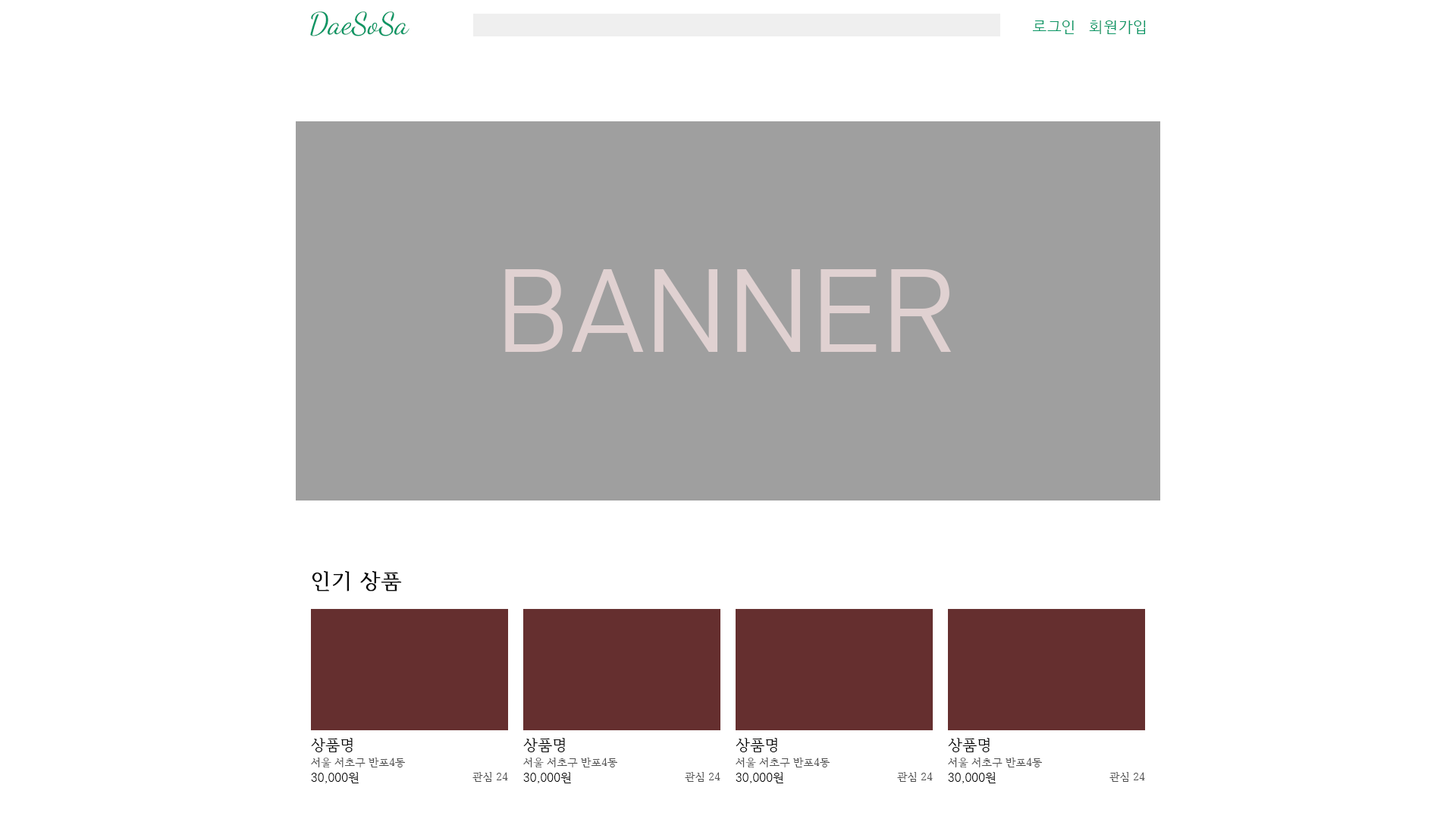
<style>
.page{position:relative;width:1456px;height:819px;background:#ffffff}
.page>*{position:absolute;margin:0}
.t1{font:30.3px "DancingScript-Regular";color:#0a9664}
.t2{font:15.2px "HCRDotum";color:#0a9664}
.t3{font:113.7px "HCRDotum";color:#e0d1d1}
.t4{font:21.2px "HCRBatang";color:#080808;font-weight:bold}
.t5{font:15.2px "HCRBatang";color:#080808}
.t6{font:10.6px "HCRBatang";color:#505050}
.t7{font:12.1px "HCRBatang";color:#080808}
</style>
<div class="page">
<p class="t1" style="left:310px;top:11px;width:99px;height:25px">DaeSoSa</p>
<p class="t2" style="left:1032px;top:20px;width:42px;height:14px">로그인</p>
<p class="t2" style="left:1089px;top:20px;width:57px;height:14px">회원가입</p>
<p class="t3" style="left:505px;top:269px;width:446px;height:83px">BANNER</p>
<p class="t4" style="left:312px;top:571px;width:90px;height:20px">인기 상품</p>
<p class="t5" style="left:311px;top:738px;width:42px;height:14px">상품명</p>
<p class="t5" style="left:523px;top:738px;width:42px;height:14px">상품명</p>
<p class="t5" style="left:736px;top:738px;width:41px;height:14px">상품명</p>
<p class="t5" style="left:948px;top:738px;width:42px;height:14px">상품명</p>
<p class="t6" style="left:311px;top:758px;width:94px;height:10px">서울 서초구 반포4동</p>
<p class="t6" style="left:523px;top:758px;width:94px;height:10px">서울 서초구 반포4동</p>
<p class="t6" style="left:736px;top:758px;width:94px;height:10px">서울 서초구 반포4동</p>
<p class="t6" style="left:948px;top:758px;width:94px;height:10px">서울 서초구 반포4동</p>
<p class="t7" style="left:311px;top:772px;width:48px;height:11px">30,000원</p>
<p class="t6" style="left:472px;top:772px;width:36px;height:10px">관심 24</p>
<p class="t7" style="left:523px;top:772px;width:48px;height:11px">30,000원</p>
<p class="t6" style="left:685px;top:772px;width:35px;height:10px">관심 24</p>
<p class="t7" style="left:736px;top:772px;width:47px;height:11px">30,000원</p>
<p class="t6" style="left:897px;top:772px;width:36px;height:10px">관심 24</p>
<p class="t7" style="left:948px;top:772px;width:48px;height:11px">30,000원</p>
<p class="t6" style="left:1109px;top:772px;width:36px;height:10px">관심 24</p>
</div>
